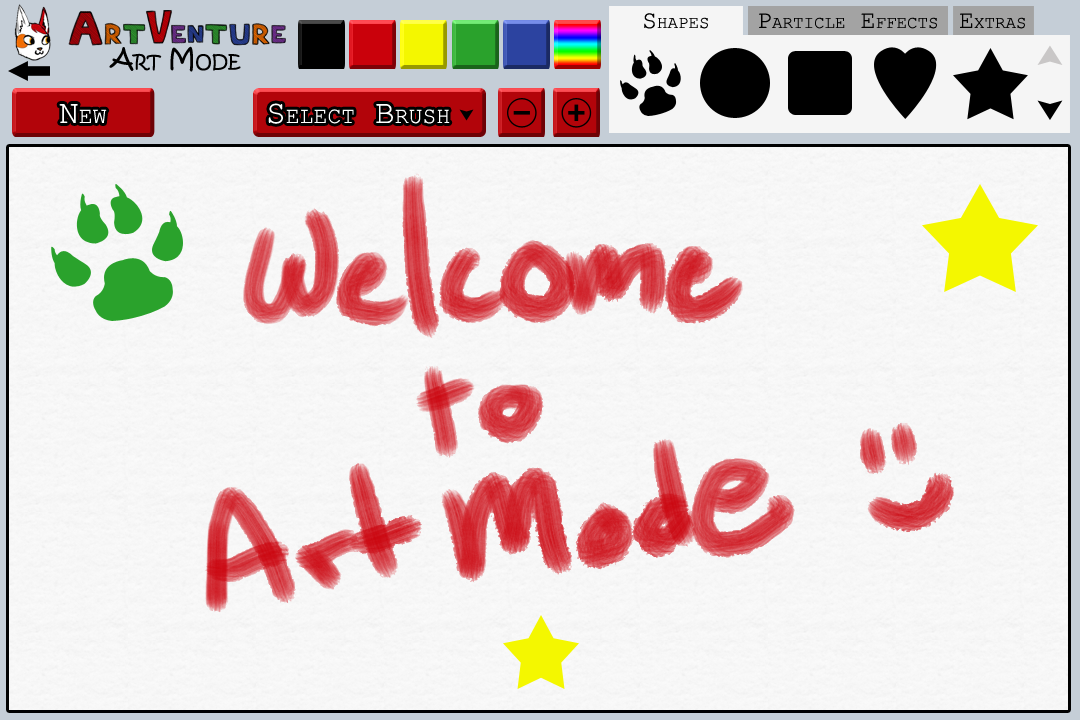
<style>
.page{position:relative;width:1080px;height:720px}
.page>*{position:absolute;margin:0}
.t1{font:25px "CourierNewPSMT";color:#000000;font-variant:small-caps}
.t2{font:25.7px "KristenITC-Regular";color:#000000;font-variant:small-caps}
.t3{font:33px "CourierNewPSMT";color:#ffffff;font-variant:small-caps}
</style>
<div class="page">
<p class="t1" style="left:644px;top:13px;width:64px;height:16px">Shapes</p>
<p class="t1" style="left:759px;top:13px;width:178px;height:16px">Particle Effects</p>
<p class="t1" style="left:960px;top:13px;width:65px;height:16px">Extras</p>
<p class="t2" style="left:109px;top:46px;width:132px;height:26px">Art Mode</p>
<p class="t3" style="left:59px;top:104px;width:48px;height:19px">New</p>
<p class="t3" style="left:268px;top:103px;width:182px;height:21px">Select Brush</p>
</div>
